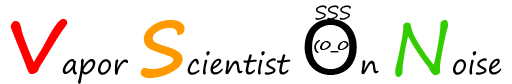
<style>
.page{position:relative;width:512px;height:84px;background:#ffffff}
.page>*{position:absolute;margin:0}
.t1{font:18.7px "SegoePrint";color:#000000}
.t2{font:28px "SegoePrint";color:#000000}
.t3{font:74.7px "SegoePrint-Bold";color:#ff0000}
.t4{font:74.7px "SegoePrint-Bold";color:#ff9900}
.t5{font:74.7px "ArialMT";color:#000000}
.t6{font:74.7px "SegoePrint";color:#33cc00}
.t7{font:13px "SegoePrint-Bold";color:#000000;scale:1.15 1}
.t8{font:13px "Small Fonts";color:#000000;scale:1.15 1}
</style>
<div class="page">
<p class="t1" style="left:315px;top:5px;width:36px;height:15px">SSS</p>
<p class="t2" style="left:10px;top:19px;width:492px;height:65px"><span class="t3">V</span>apor <span class="t4">S</span>cientist <span class="t5">O</span>n <span class="t6">N</span>oise</p>
<p class="t7" style="left:314px;top:40px;width:35px;height:13px">(0<span class="t8">_</span>0</p>
</div>
